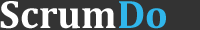
<style>
.page{position:relative;width:200px;height:30px;background:#333333}
.page>*{position:absolute;margin:0}
.t1{font:40px "Cambria-Bold";color:#ffffff}
.t2{font:40px "Cambria-Bold";color:#30b6eb}
</style>
<div class="page">
<p class="t1" style="left:0px;top:1px;width:166px;height:28px">Scrum<span class="t2">Do</span></p>
</div>
